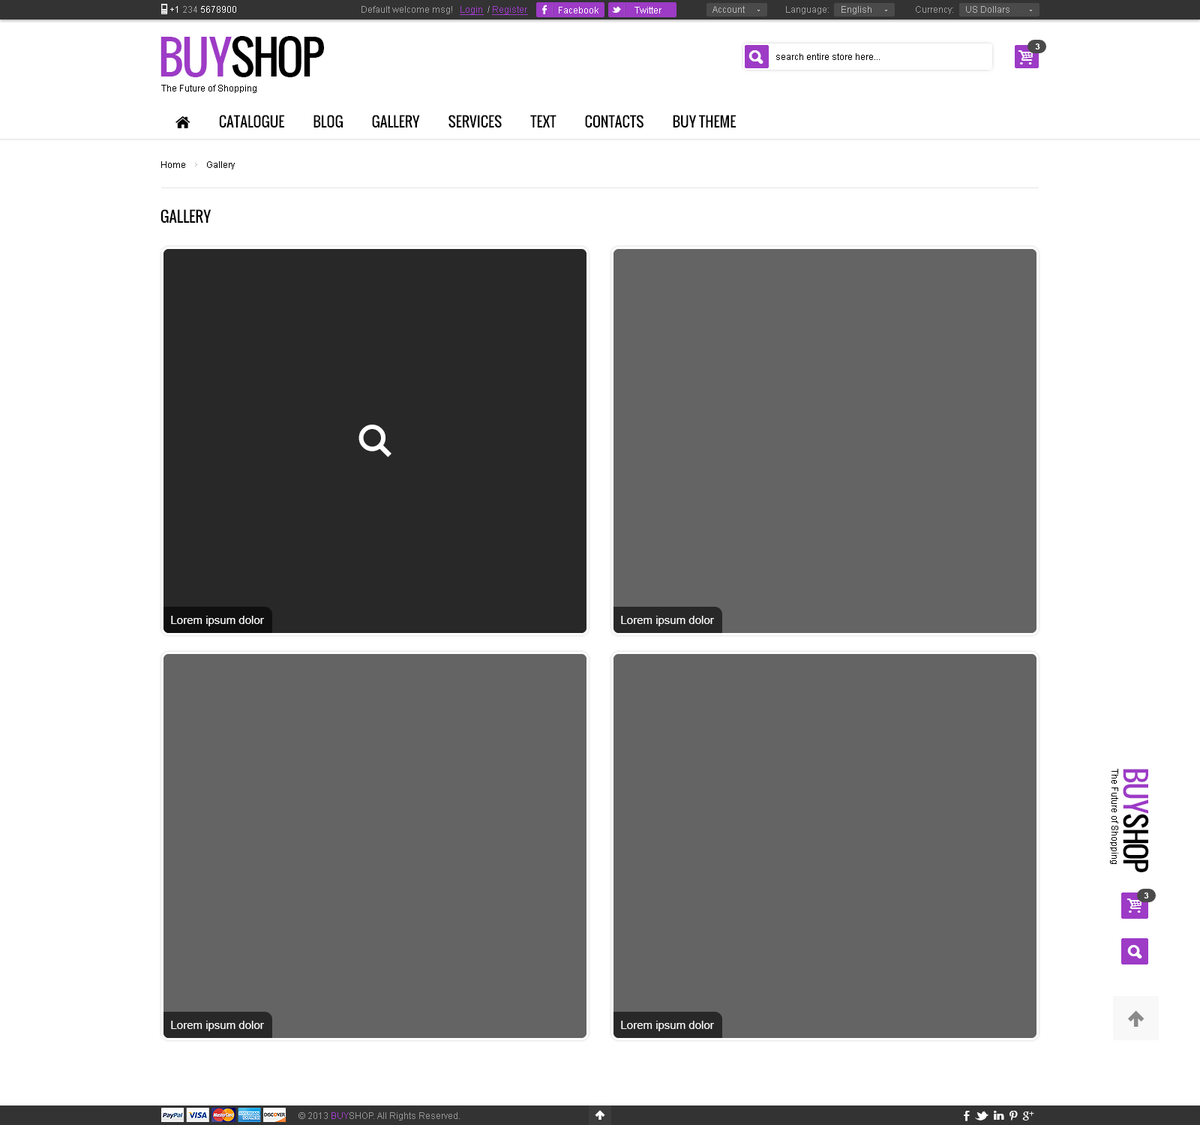
<style>
.page{position:relative;width:1200px;height:1125px;background:#ffffff}
.page>*{position:absolute;margin:0}
.t1{font:9px "ArialMT";color:#ffffff}
.t2{font:9px "ArialMT";color:#9b9b9b}
.t3{font:9px "ArialMT";color:#9d3bc6;text-decoration:underline}
.t4{font:9px "ArialMT";color:#b6b6b6}
.t5{font:45px "Oswald";letter-spacing:-0.06em;color:#000000;text-transform:uppercase}
.t6{font:45px "Oswald";letter-spacing:-0.06em;color:#9d3bc6;text-transform:uppercase}
.t7{font:9px "ArialMT";color:#000000}
.t8{font:8.2px "Arial-BoldMT";color:#ffffff;text-transform:uppercase}
.t9{font:15px "Oswald";color:#000000;text-transform:uppercase}
.t10{font:11.2px "ArialMT";color:#ffffff}
.t11{font:28.5px "Oswald";letter-spacing:-0.06em;color:#000000;text-transform:uppercase}
.t12{font:28.5px "Oswald";letter-spacing:-0.06em;color:#9d3bc6;text-transform:uppercase}
.t13{font:9px "ArialMT";color:#959595}
.t14{font:9px "ArialMT";color:#9d3bc6}
</style>
<div class="page">
<p class="t1" style="left:170px;top:6px;width:66px;height:7px">+1 <span class="t2">234 </span>5678900</p>
<p class="t2" style="left:362px;top:6px;width:166px;height:9px">Default welcome msg!   <span class="t3">Login </span> / <span class="t3">Register</span></p>
<p class="t2" style="left:362px;top:6px;width:166px;height:9px">Default welcome msg!   <span class="t3">Login </span> / <span class="t3">Register</span></p>
<p class="t4" style="left:712px;top:6px;width:33px;height:7px">Account</p>
<p class="t2" style="left:786px;top:6px;width:86px;height:8px">Language:     <span class="t4">English</span></p>
<p class="t4" style="left:916px;top:6px;width:94px;height:8px"><span class="t2">Currency:     </span>US Dollars</p>
<p class="t1" style="left:559px;top:7px;width:39px;height:7px">Facebook</p>
<p class="t1" style="left:634px;top:7px;width:28px;height:7px">Twitter</p>
<p class="t5" style="left:160px;top:36px;width:164px;height:41px"><span class="t6">buy</span>shop</p>
<p class="t7" style="left:776px;top:53px;width:104px;height:7px">search entire store here...</p>
<p class="t8" style="left:1035px;top:44px;width:5px;height:6px">3</p>
<p class="t7" style="left:161px;top:85px;width:95px;height:8px">The Future of Shopping</p>
<p class="t7" style="left:161px;top:161px;width:74px;height:9px">Home         Gallery</p>
<p class="t9" style="left:160px;top:209px;width:52px;height:15px">GALLERY</p>
<p class="t10" style="left:171px;top:616px;width:93px;height:10px">Lorem ipsum dolor</p>
<p class="t10" style="left:621px;top:616px;width:93px;height:10px">Lorem ipsum dolor</p>
<p class="t7" style="left:1110px;top:769px;width:8px;height:95px;rotate:90deg">The Future of Shopping</p>
<p class="t11" style="left:1123px;top:769px;width:26px;height:103px;rotate:90deg"><span class="t12">buy</span>shop</p>
<p class="t8" style="left:1144px;top:892px;width:5px;height:6px">3</p>
<p class="t10" style="left:171px;top:1021px;width:93px;height:10px">Lorem ipsum dolor</p>
<p class="t10" style="left:621px;top:1021px;width:93px;height:10px">Lorem ipsum dolor</p>
<p class="t13" style="left:298px;top:1112px;width:162px;height:8px">© 2013 <span class="t14">BUY</span>SHOP. All Rights Reserved.</p>
</div>
